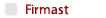
<style>
.page{position:relative;width:106px;height:18px;background:#ffffff}
.page>*{position:absolute;margin:0}
.t1{font:14px "MyriadPro-Regular";color:#941010}
</style>
<div class="page">
<p class="t1" style="left:26px;top:4px;width:43px;height:11px">Firmast</p>
</div>
